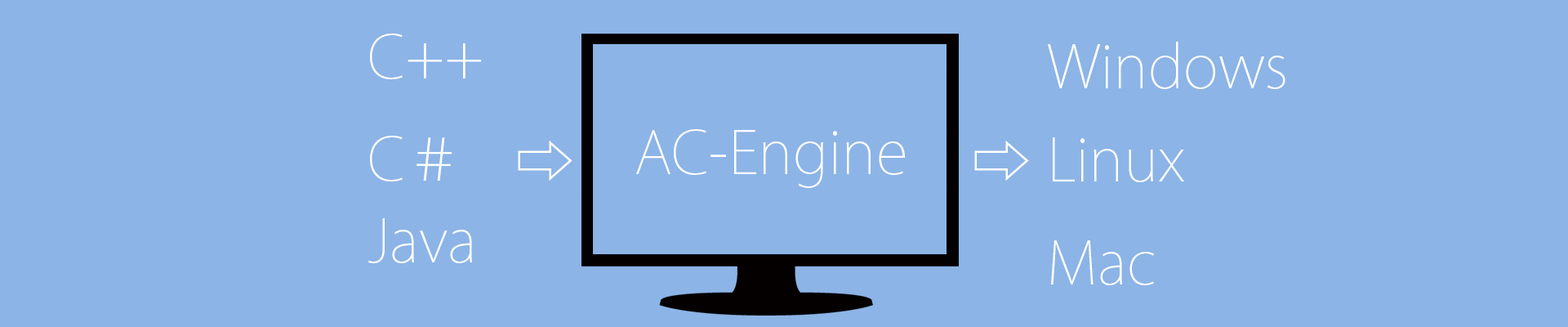
<style>
.page{position:relative;width:1568px;height:327px;background:#8cb4e6}
.page>*{position:absolute;margin:0}
.t1{font:58.8px "KozGoPro-ExtraLight";color:#ffffff}
.t2{font:58.8px "KozGoPr6N-Regular";color:#ffffff}
</style>
<div class="page">
<p class="t1" style="left:370px;top:33px;width:111px;height:46px">C++</p>
<p class="t1" style="left:1048px;top:42px;width:237px;height:47px">Windows</p>
<p class="t1" style="left:370px;top:136px;width:82px;height:45px">C＃</p>
<p class="t1" style="left:636px;top:129px;width:269px;height:59px">AC-Engine</p>
<p class="t1" style="left:1053px;top:137px;width:131px;height:45px">Linux</p>
<p class="t2" style="left:518px;top:140px;width:54px;height:40px">⇨</p>
<p class="t2" style="left:974px;top:140px;width:55px;height:40px">⇨</p>
<p class="t1" style="left:368px;top:218px;width:104px;height:45px">Java</p>
<p class="t1" style="left:1051px;top:240px;width:104px;height:45px">Mac</p>
</div>
